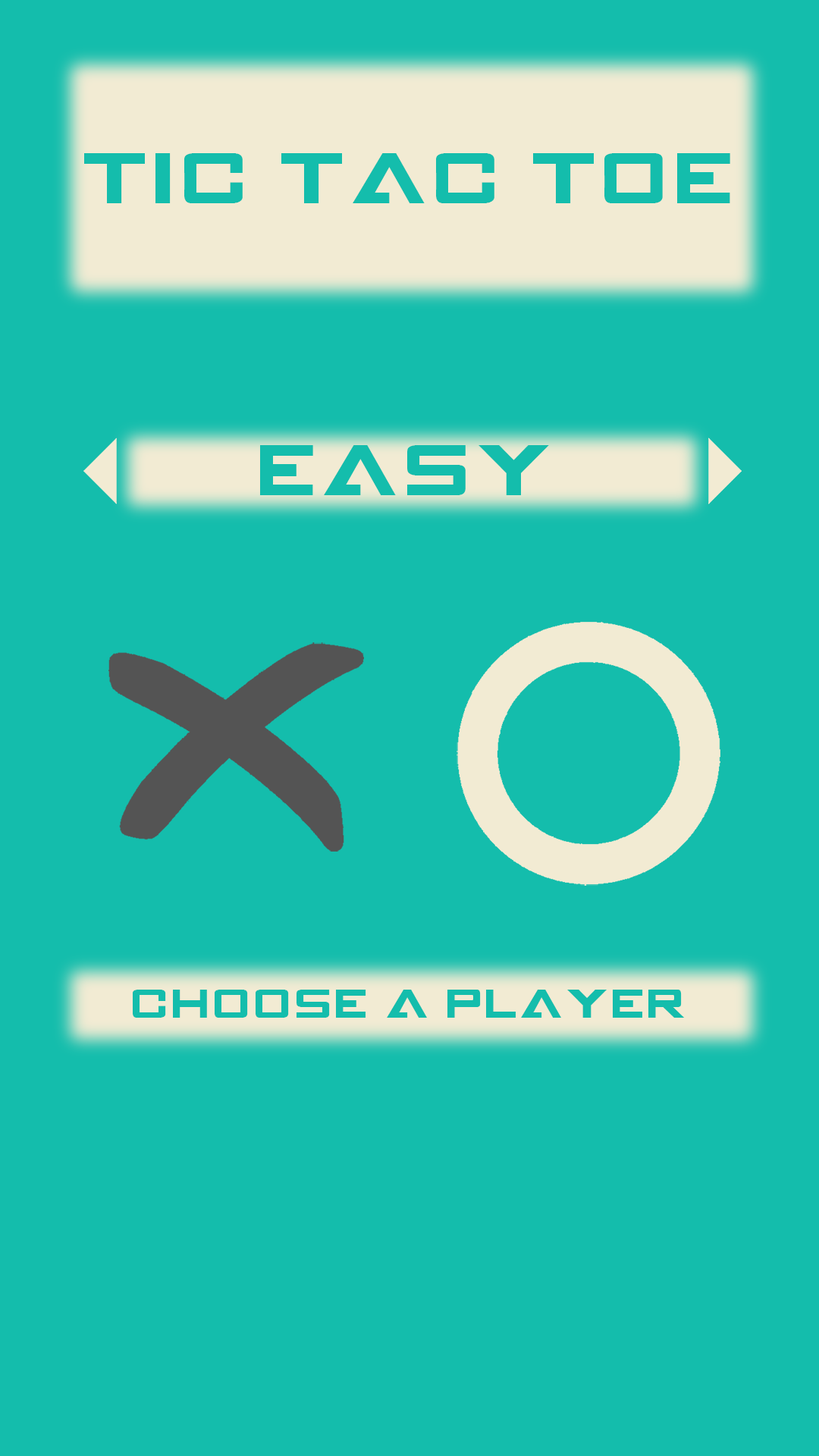
<style>
.page{position:relative;width:819px;height:1456px;background:#14bdac}
.page>*{position:absolute;margin:0}
.t1{font:62.2px "GAMECUBENDualSet";color:#14bdac}
.t2{font:34.9px "GAMECUBENDualSet";color:#14bdac}
</style>
<div class="page">
<p class="t1" style="left:84px;top:153px;width:646px;height:50px">TIC TAC TOE</p>
<p class="t1" style="left:260px;top:445px;width:289px;height:50px">EASY</p>
<p class="t2" style="left:133px;top:990px;width:552px;height:28px">CHOOSE A PLAYER</p>
</div>
